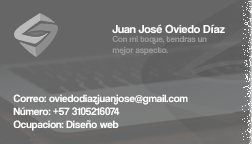
<style>
.page{position:relative;width:252px;height:144px;background:#666666}
.page>*{position:absolute;margin:0}
.t1{font:12px "CoolveticaRg-Regular";color:#ffffff}
.t2{font:9px "CoolveticaRg-Regular";color:#999999}
.t3{font:11px "CoolveticaRg-Regular";color:#ffffff}
</style>
<div class="page">
<p class="t1" style="left:112px;top:24px;width:113px;height:10px">Juan José Oviedo Díaz</p>
<p class="t2" style="left:112px;top:35px;width:95px;height:20px">Con mi toque, tendras un <br>mejor aspecto.</p>
<p class="t3" style="left:13px;top:94px;width:175px;height:37px">Correo: oviedodiazjuanjose@gmail.com<br>Número: +57 3105216074<br>Ocupacion: Diseño web</p>
</div>
